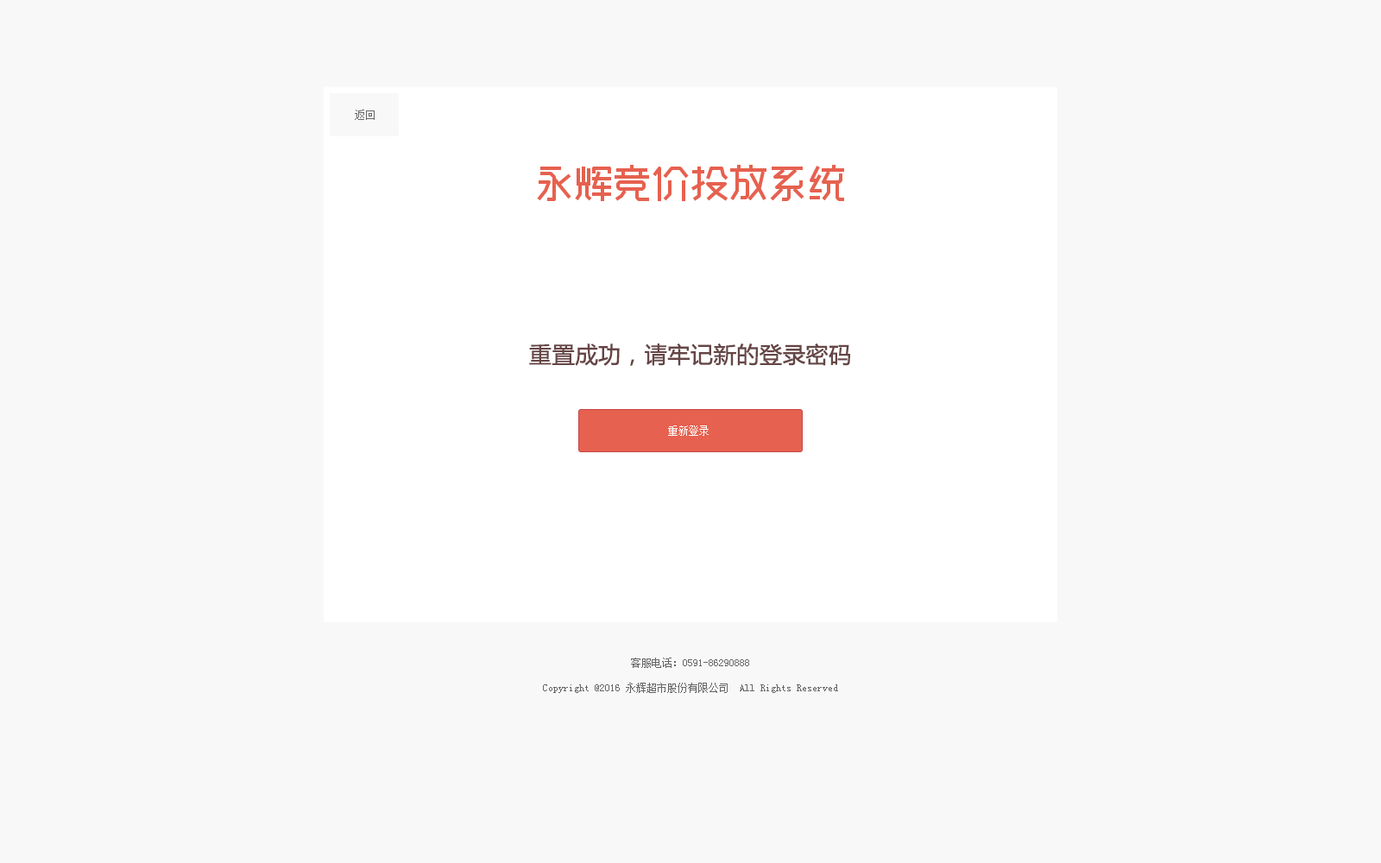
<style>
.page{position:relative;width:1381px;height:863px;background:#f8f8f8}
.page>*{position:absolute;margin:0}
.t1{font:10.4px "SimSun";color:#666666}
.t2{font:22.4px "MicrosoftYaHei";color:#664545;font-weight:bold}
.t3{font:10.4px "SimSun";color:#ffffff}
</style>
<div class="page">
<p class="t1" style="left:355px;top:110px;width:20px;height:10px">返回</p>
<p class="t2" style="left:529px;top:344px;width:321px;height:22px">重置成功，请牢记新的登录密码</p>
<p class="t3" style="left:668px;top:426px;width:41px;height:10px">重新登录</p>
<p class="t1" style="left:631px;top:658px;width:118px;height:10px">客服电话：0591-86290888</p>
<p class="t1" style="left:543px;top:683px;width:295px;height:10px">Copyright @2016 永辉超市股份有限公司  All Rights Reserved</p>
</div>
